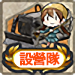
<style>
.page{position:relative;width:75px;height:75px}
.page>*{position:absolute;margin:0}
.t1{font:14px "GothicMB101Pr6N-Medium";letter-spacing:-0.075em;color:#fc4908;font-weight:bold}
</style>
<div class="page">
<p class="t1" style="left:19px;top:52px;width:41px;height:14px">設營隊</p>
</div>
